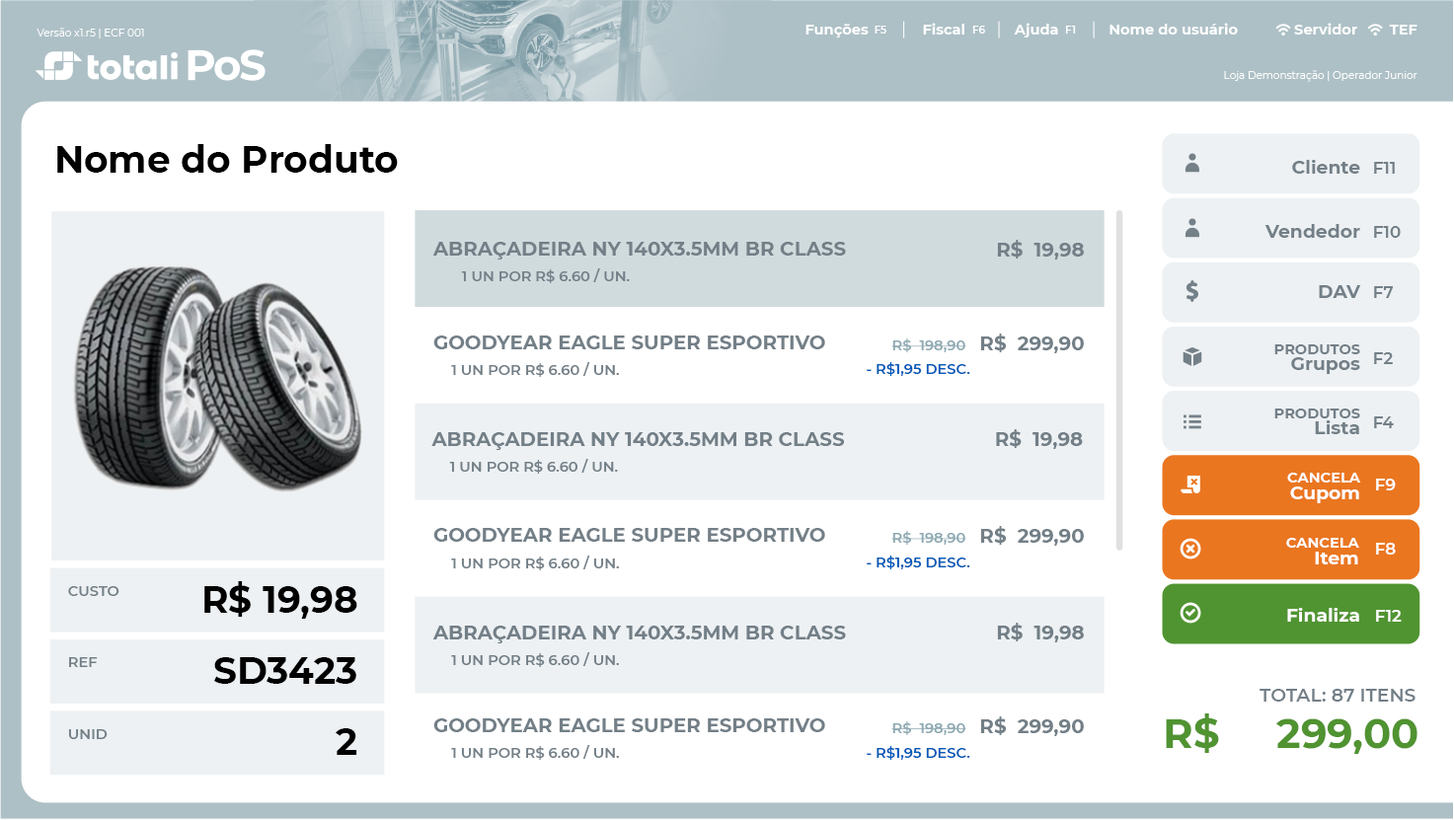
<style>
.page{position:relative;width:1454px;height:820px;background:#ffffff}
.page>*{position:absolute;margin:0}
.t1{font:10.3px "Montserrat-Regular";color:#ffffff}
.t2{font:14.4px "Montserrat-Bold";color:#ffffff}
.t3{font:10.3px "Montserrat-SemiBold";color:#ffffff}
.t4{font:37px "Montserrat-Bold";color:#000000}
.t5{font:18.5px "Montserrat-Bold";color:#748088}
.t6{font:16.4px "Montserrat-SemiBold";color:#748088}
.t7{font:19.5px "Montserrat-Bold";color:#748088}
.t8{font:14.4px "Montserrat-SemiBold";color:#748088}
.t9{font:14.4px "Montserrat-SemiBold";color:#8ea9b2}
.t10{font:14.4px/16.4px "Montserrat-Bold";color:#748088}
.t11{font:18.5px/16.4px "Montserrat-Bold";color:#748088}
.t12{font:14.4px "Montserrat-SemiBold";color:#005bb9}
.t13{font:14.4px/16.4px "Montserrat-Bold";color:#ffffff}
.t14{font:18.5px/16.4px "Montserrat-Bold";color:#ffffff}
.t15{font:16.4px "Montserrat-SemiBold";color:#ffffff}
.t16{font:18.5px "Montserrat-Bold";color:#ffffff}
.t17{font:18.5px "Montserrat-SemiBold";color:#748088}
.t18{font:41.1px "Montserrat-Bold";color:#509431}
</style>
<div class="page">
<p class="t1" style="left:37px;top:28px;width:107px;height:10px">Versão x1.r5 | ECF 001</p>
<p class="t2" style="left:805px;top:24px;width:64px;height:14px">Funções</p>
<p class="t3" style="left:874px;top:26px;width:12px;height:8px">F5</p>
<p class="t2" style="left:923px;top:23px;width:41px;height:12px">Fiscal</p>
<p class="t3" style="left:972px;top:26px;width:13px;height:8px">F6</p>
<p class="t2" style="left:1014px;top:23px;width:44px;height:15px">Ajuda</p>
<p class="t3" style="left:1065px;top:26px;width:11px;height:8px">F1</p>
<p class="t2" style="left:1109px;top:23px;width:129px;height:12px">Nome do usuário</p>
<p class="t2" style="left:1294px;top:23px;width:63px;height:12px">Servidor</p>
<p class="t2" style="left:1389px;top:25px;width:28px;height:10px">TEF</p>
<p class="t1" style="left:1224px;top:70px;width:193px;height:12px">Loja Demonstração | Operador Junior</p>
<p class="t4" style="left:57px;top:144px;width:341px;height:29px">Nome do Produto</p>
<p class="t5" style="left:1292px;top:160px;width:68px;height:14px">Cliente</p>
<p class="t6" style="left:1374px;top:162px;width:21px;height:12px">F11</p>
<p class="t5" style="left:1264px;top:224px;width:96px;height:14px">Vendedor</p>
<p class="t6" style="left:1374px;top:226px;width:27px;height:12px">F10</p>
<p class="t7" style="left:432px;top:242px;width:414px;height:18px">ABRAÇADEIRA NY 140X3.5MM BR CLASS</p>
<p class="t7" style="left:997px;top:240px;width:87px;height:20px">R$  19,98</p>
<p class="t8" style="left:461px;top:268px;width:169px;height:15px">1 UN POR R$ 6.60 / UN.</p>
<p class="t5" style="left:1319px;top:285px;width:42px;height:13px">DAV</p>
<p class="t6" style="left:1374px;top:286px;width:20px;height:12px">F7</p>
<p class="t7" style="left:433px;top:336px;width:392px;height:13px">GOODYEAR EAGLE SUPER ESPORTIVO</p>
<p class="t9" style="left:891px;top:339px;width:75px;height:13px">R$  198,90</p>
<p class="t7" style="left:980px;top:334px;width:104px;height:19px">R$  299,90</p>
<p class="t10" style="left:1274px;top:344px;width:86px;height:30px;text-align:right">PRODUTOS<br><span class="t11">Grupos</span></p>
<p class="t6" style="left:1374px;top:352px;width:19px;height:12px">F2</p>
<p class="t8" style="left:451px;top:362px;width:168px;height:15px">1 UN POR R$ 6.60 / UN.</p>
<p class="t12" style="left:867px;top:362px;width:103px;height:14px">- R$1,95 DESC.</p>
<p class="t10" style="left:1274px;top:409px;width:86px;height:25px;text-align:right">PRODUTOS<br><span class="t11">Lista</span></p>
<p class="t6" style="left:1374px;top:417px;width:20px;height:11px">F4</p>
<p class="t7" style="left:431px;top:432px;width:414px;height:18px">ABRAÇADEIRA NY 140X3.5MM BR CLASS</p>
<p class="t7" style="left:996px;top:429px;width:87px;height:20px">R$  19,98</p>
<p class="t8" style="left:449px;top:459px;width:169px;height:15px">1 UN POR R$ 6.60 / UN.</p>
<p class="t13" style="left:1287px;top:473px;width:74px;height:30px;text-align:right">CANCELA<br><span class="t14">Cupom</span></p>
<p class="t15" style="left:1376px;top:479px;width:20px;height:12px">F9</p>
<p class="t7" style="left:433px;top:528px;width:392px;height:14px">GOODYEAR EAGLE SUPER ESPORTIVO</p>
<p class="t9" style="left:891px;top:531px;width:75px;height:14px">R$  198,90</p>
<p class="t7" style="left:980px;top:526px;width:104px;height:20px">R$  299,90</p>
<p class="t13" style="left:1286px;top:538px;width:73px;height:27px;text-align:right">CANCELA<br><span class="t14">Item</span></p>
<p class="t15" style="left:1376px;top:543px;width:20px;height:12px">F8</p>
<p class="t8" style="left:451px;top:556px;width:168px;height:14px">1 UN POR R$ 6.60 / UN.</p>
<p class="t12" style="left:867px;top:556px;width:103px;height:13px">- R$1,95 DESC.</p>
<p class="t4" style="left:204px;top:581px;width:153px;height:38px">R$ 19,98</p>
<p class="t8" style="left:68px;top:586px;width:51px;height:10px">CUSTO</p>
<p class="t16" style="left:1287px;top:608px;width:72px;height:14px">Finaliza</p>
<p class="t15" style="left:1376px;top:610px;width:26px;height:12px">F12</p>
<p class="t7" style="left:432px;top:626px;width:414px;height:18px">ABRAÇADEIRA NY 140X3.5MM BR CLASS</p>
<p class="t7" style="left:997px;top:623px;width:87px;height:20px">R$  19,98</p>
<p class="t8" style="left:451px;top:652px;width:168px;height:15px">1 UN POR R$ 6.60 / UN.</p>
<p class="t8" style="left:69px;top:657px;width:29px;height:10px">REF</p>
<p class="t4" style="left:214px;top:657px;width:142px;height:27px">SD3423</p>
<p class="t17" style="left:1259px;top:689px;width:156px;height:13px">TOTAL: 87 ITENS</p>
<p class="t18" style="left:1166px;top:714px;width:53px;height:39px">R$</p>
<p class="t7" style="left:433px;top:719px;width:392px;height:13px">GOODYEAR EAGLE SUPER ESPORTIVO</p>
<p class="t9" style="left:891px;top:721px;width:75px;height:14px">R$  198,90</p>
<p class="t7" style="left:980px;top:717px;width:104px;height:19px">R$  299,90</p>
<p class="t18" style="left:1276px;top:719px;width:141px;height:35px">299,00</p>
<p class="t8" style="left:68px;top:729px;width:40px;height:10px">UNID</p>
<p class="t4" style="left:336px;top:728px;width:21px;height:27px">2</p>
<p class="t8" style="left:451px;top:745px;width:168px;height:15px">1 UN POR R$ 6.60 / UN.</p>
<p class="t12" style="left:867px;top:746px;width:103px;height:14px">- R$1,95 DESC.</p>
</div>
